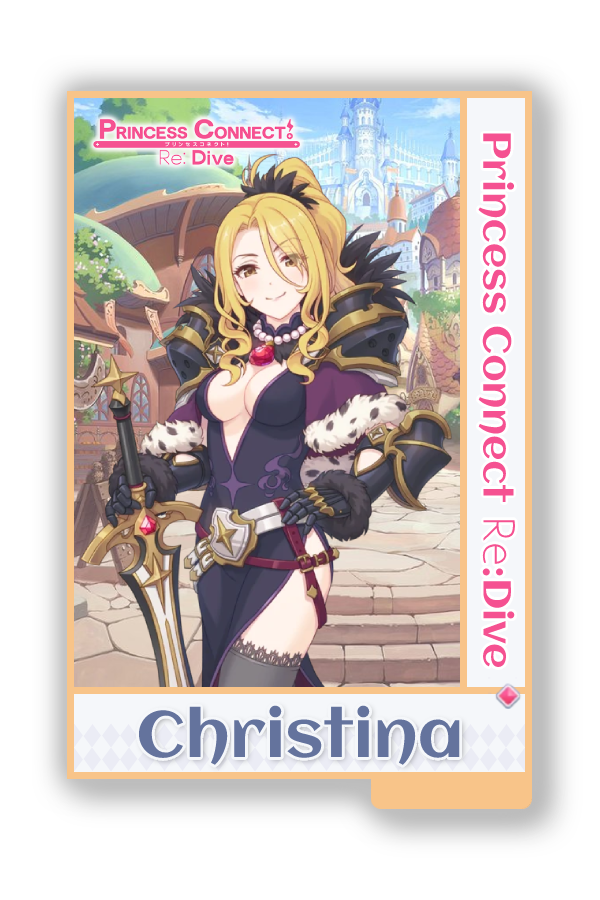
<style>
.page{position:relative;width:600px;height:900px;background:#ffffff}
.page>*{position:absolute;margin:0}
.t1{font:39px "Aclonica-Regular";color:#f55191}
.t2{font:39px "AaarghNormal";color:#f55191}
.t3{font:65px "Aclonica-Regular";color:#64739d}
</style>
<div class="page">
<p class="t1" style="left:478px;top:133px;width:38px;height:534px;rotate:90deg">Princess Connect <span class="t2">Re</span>:Dive</p>
<p class="t3" style="left:138px;top:705px;width:322px;height:60px">Christina</p>
</div>
